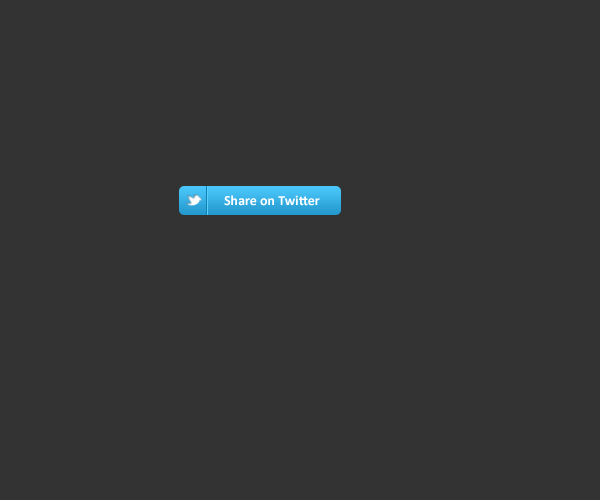
<style>
.page{position:relative;width:600px;height:500px;background:#333333}
.page>*{position:absolute;margin:0}
.t1{font:14px "Calibri-Bold";color:#ffffff}
</style>
<div class="page">
<p class="t1" style="left:224px;top:195px;width:96px;height:11px">Share on Twitter</p>
</div>
